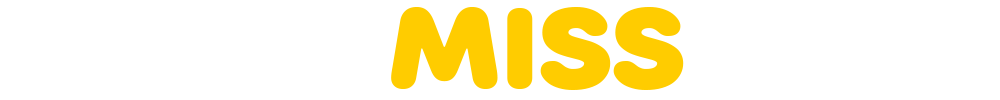
<style>
.page{position:relative;width:1000px;height:100px;background:#ffffff}
.page>*{position:absolute;margin:0}
.t1{font:113px "RoundsBlack";color:#ffcc00}
</style>
<div class="page">
<p class="t1" style="left:391px;top:7px;width:293px;height:83px">miss</p>
</div>
